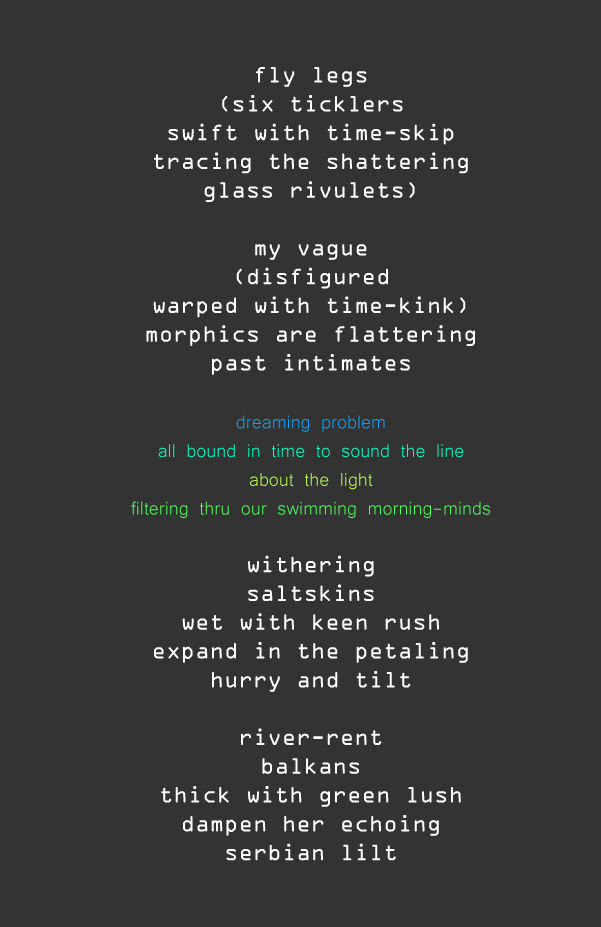
<style>
.page{position:relative;width:601px;height:927px;background:#333333}
.page>*{position:absolute;margin:0}
.t1{font:24px "OCRAExtended";color:#ffffff}
.t2{font:24px "Microsoft-Yi-Baiti";color:#0ea3f9}
.t3{font:24px "Microsoft-Yi-Baiti";color:#05ffc7}
.t4{font:24px "Microsoft-Yi-Baiti";color:#baff4c}
.t5{font:24px "Microsoft-Yi-Baiti";color:#4fff5b}
</style>
<div class="page">
<p class="t1" style="left:131px;top:67px;width:359px;height:794px;text-align:center">fly legs<br>(six ticklers<br>swift with time-skip<br>tracing the shattering<br>glass rivulets)<br><br>my vague<br>(disfigured<br>warped with time-kink)<br>morphics are flattering<br>past intimates<br><br><span class="t2">dreaming problem<br></span><span class="t3">all bound in time to sound the line<br></span><span class="t4">about the light<br></span><span class="t5">filtering thru our swimming morning-minds<br></span><br>withering<br>saltskins<br>wet with keen rush<br>expand in the petaling<br>hurry and tilt<br><br>river-rent<br>balkans<br>thick with green lush<br>dampen her echoing<br>serbian lilt</p>
</div>
